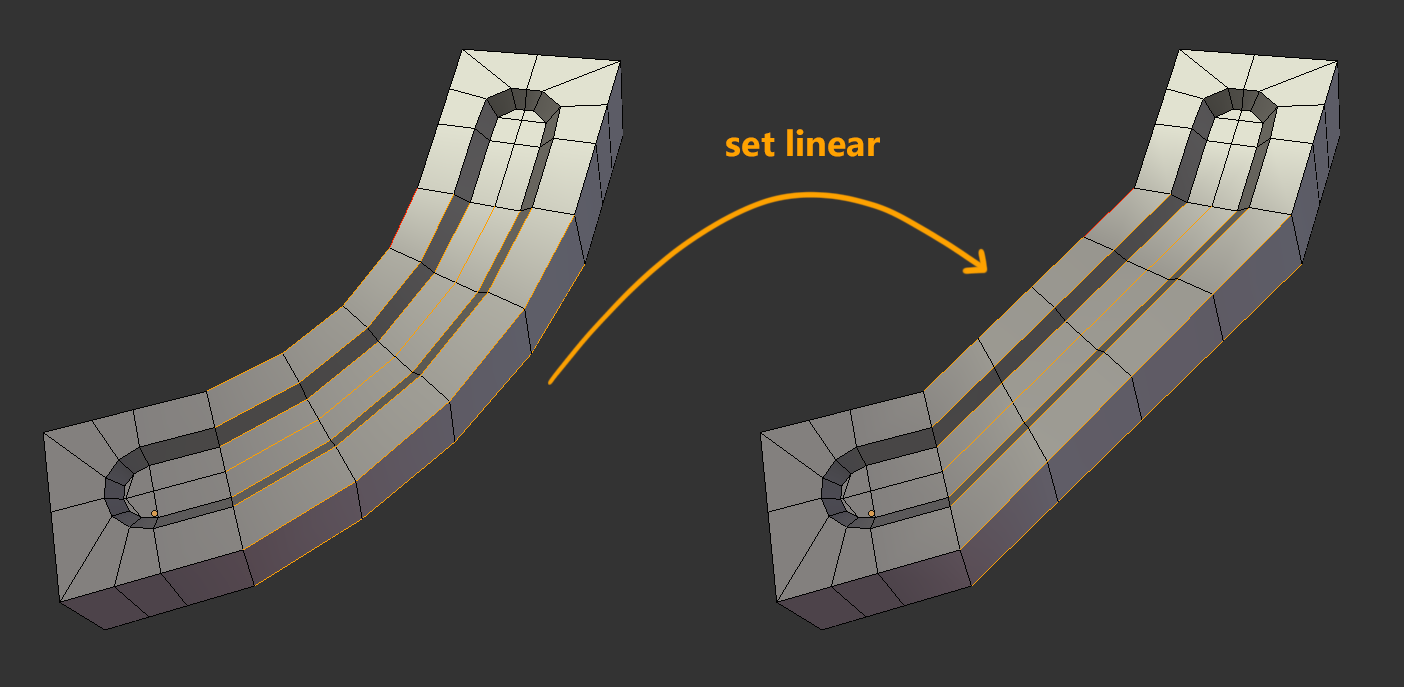
<style>
.page{position:relative;width:1404px;height:687px;background:#333333}
.page>*{position:absolute;margin:0}
.t1{font:36px "SegoeUI-Bold";color:#ffa200}
</style>
<div class="page">
<p class="t1" style="left:726px;top:129px;width:154px;height:28px">set linear</p>
</div>
